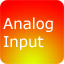
<style>
.page{position:relative;width:64px;height:64px}
.page>*{position:absolute;margin:0}
.t1{font:14.9px "Verdana";color:#ffffff}
</style>
<div class="page">
<p class="t1" style="left:3px;top:17px;width:50px;height:33px">Analog<br>Input</p>
</div>
